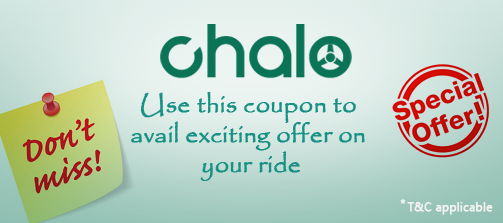
<style>
.page{position:relative;width:503px;height:223px}
.page>*{position:absolute;margin:0}
.t1{font:24.8px "Papyrus-Regular";color:#189184;font-weight:bold}
.t2{font:12px "SegoeUI";color:#f4f1f1;font-weight:bold}
</style>
<div class="page">
<p class="t1" style="left:131px;top:92px;width:234px;height:89px;text-align:center">Use this coupon to <br>avail exciting offer on <br>your ride</p>
<p class="t2" style="left:400px;top:199px;width:6px;height:5px">*</p>
<p class="t2" style="left:407px;top:202px;width:86px;height:13px">T&amp;C applicable</p>
</div>
